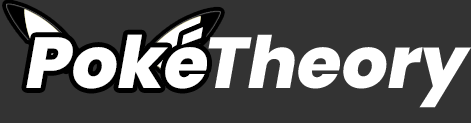
<style>
.page{position:relative;width:471px;height:123px;background:#333333}
.page>*{position:absolute;margin:0}
.t1{font:72px "Poppins-ExtraBoldItalic";color:#ffffff}
</style>
<div class="page">
<p class="t1" style="left:26px;top:27px;width:181px;height:62px">Poké</p>
<p class="t1" style="left:208px;top:34px;width:263px;height:74px">Theory</p>
</div>
